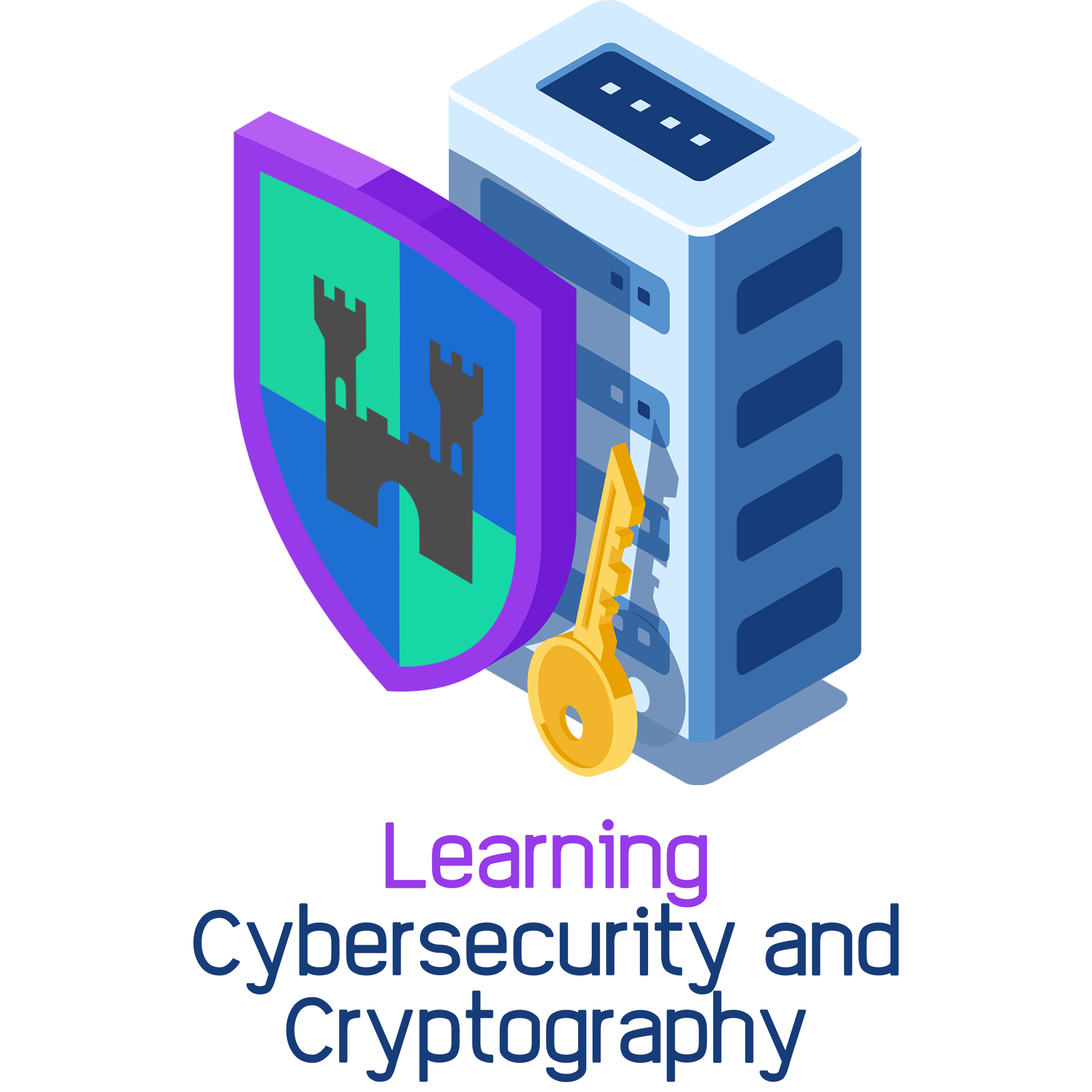
<style>
.page{position:relative;width:1092px;height:1092px;background:#ffffff}
.page>*{position:absolute;margin:0}
.t1{font:65.5px/87.4px "EleganTech";color:#163c79;font-weight:bold}
.t2{font:65.5px/87.4px "EleganTech";color:#973ae9;font-weight:bold}
</style>
<div class="page">
<p class="t1" style="left:193px;top:819px;width:706px;height:263px;text-align:center"><span class="t2">Learning<br></span>Cybersecurity and Cryptography</p>
</div>
